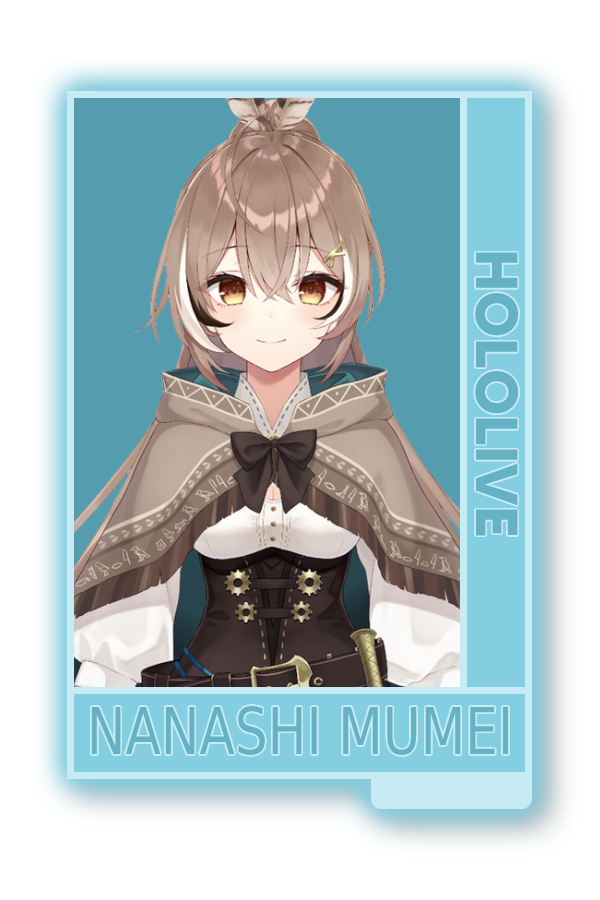
<style>
.page{position:relative;width:600px;height:900px;background:#ffffff}
.page>*{position:absolute;margin:0}
.t1{font:59.2px "MADETOMMY-Bold";color:#66b2c5}
.t2{font:64.6px "CoolveticaRg-Regular";color:#66b2c5;scale:0.8 1}
</style>
<div class="page">
<p class="t1" style="left:475px;top:252px;width:44px;height:284px;rotate:90deg">HOLOLIVE</p>
<p class="t2" style="left:91px;top:706px;width:418px;height:49px">NANASHI MUMEI</p>
</div>
